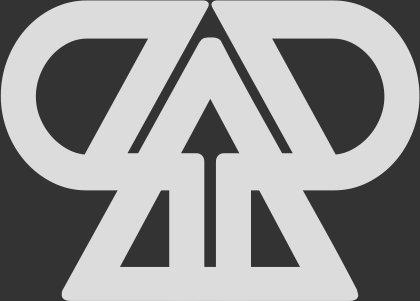
<style>
.page{position:relative;width:420px;height:301px;background:#dcdcdc}
.page>*{position:absolute;margin:0}
.t1{font:400.2px "CocoBikeR";letter-spacing:-0.12em;color:#dcdcdc;font-weight:bold;scale:0.93 1}
.t2{font:349.6px "CocoBikeR";letter-spacing:-0.12em;color:#dcdcdc;font-weight:bold;scale:1.26 1}
</style>
<div class="page">
<p class="t1" style="left:0px;top:0px;width:209px;height:301px;rotate:-180deg">P</p>
<p class="t1" style="left:211px;top:0px;width:209px;height:301px">P</p>
<p class="t2" style="left:61px;top:37px;width:298px;height:264px">A</p>
</div>
